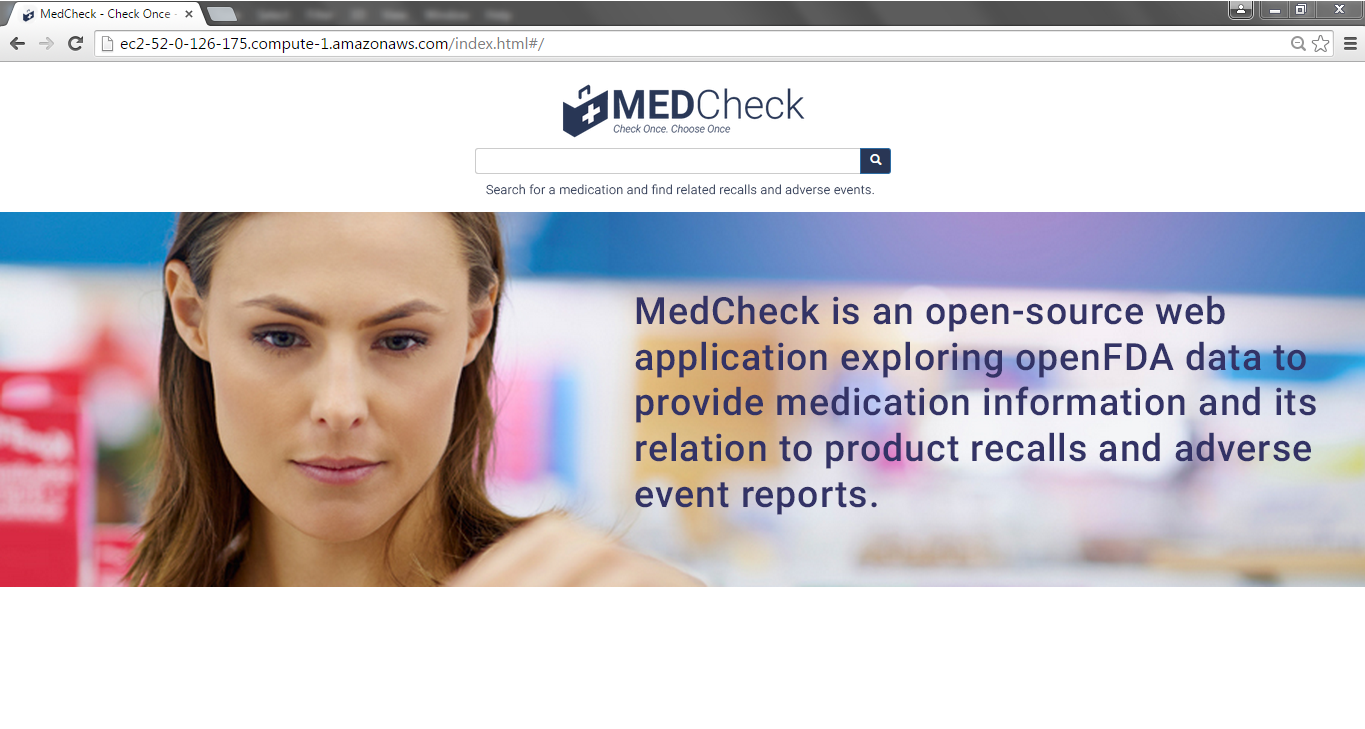
<style>
.page{position:relative;width:1365px;height:729px;background:#ffffff}
.page>*{position:absolute;margin:0}
.t1{font:12.5px "Roboto-Light";letter-spacing:0.025em;color:#283655}
.t2{font:37.5px/45.8px "Roboto-Medium";letter-spacing:0.025em;color:#333366}
</style>
<div class="page">
<p class="t1" style="left:486px;top:184px;width:388px;height:11px">Search for a medication and find related recalls and adverse events.</p>
<p class="t2" style="left:635px;top:295px;width:681px;height:220px">MedCheck is an open-source web <br>application exploring openFDA data to <br>provide medication information and its <br>relation to product recalls and adverse event reports.</p>
</div>
